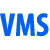
<style>
.page{position:relative;width:50px;height:50px;background:#ffffff}
.page>*{position:absolute;margin:0}
.t1{font:33px "MyriadPro-BoldCond";color:#0060ff}
</style>
<div class="page">
<p class="t1" style="left:0px;top:13px;width:49px;height:24px">VMS</p>
</div>
